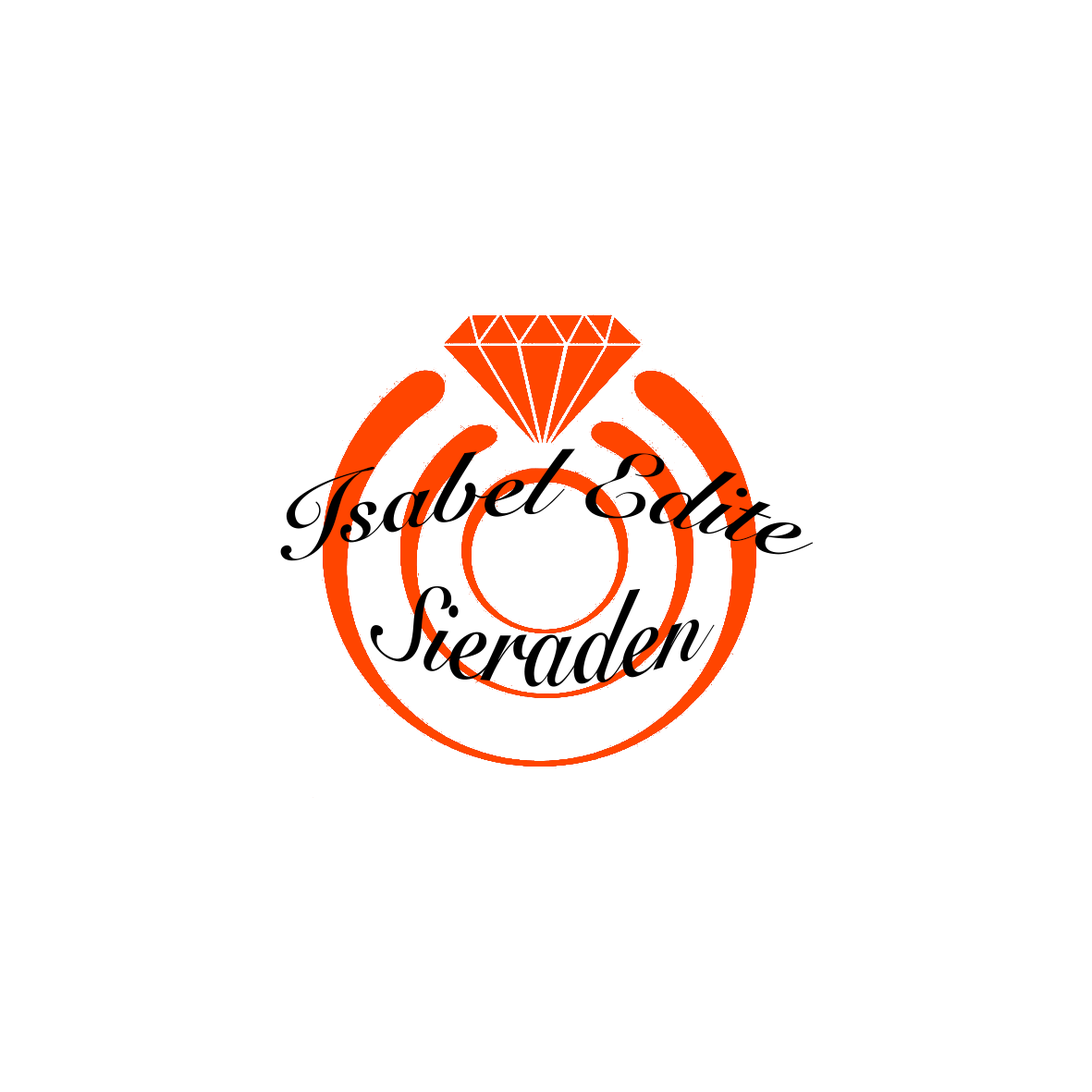
<style>
.page{position:relative;width:1092px;height:1092px;background:#ffffff}
.page>*{position:absolute;margin:0}
.t1{font:92.5px "SnellRoundhand-Bold";color:#000000}
</style>
<div class="page">
<p class="t1" style="left:280px;top:448px;width:534px;height:113px">Isabel Edite</p>
<p class="t1" style="left:370px;top:586px;width:345px;height:101px">Sieraden</p>
</div>
